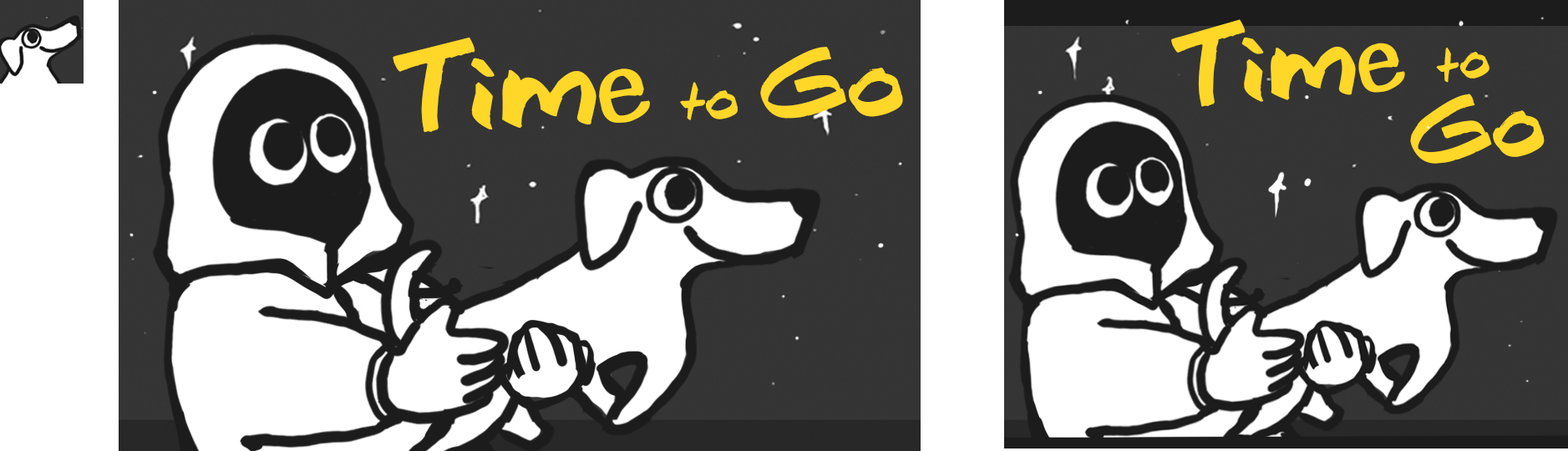
<style>
.page{position:relative;width:1568px;height:451px;background:#ffffff}
.page>*{position:absolute;margin:0}
.t1{font:110.2px "Brook23";color:#ffd728}
.t2{font:121.8px "Brook23";color:#ffd728}
.t3{font:102.3px "Brook23";color:#ffd728}
.t4{font:54.8px "Brook23";color:#ffd728}
.t5{font:60.6px "Brook23";color:#ffd728}
.t6{font:96.2px "Brook23";color:#ffd728}
</style>
<div class="page">
<p class="t1" style="left:1171px;top:19px;width:234px;height:88px;rotate:-5deg">Time</p>
<p class="t2" style="left:393px;top:37px;width:257px;height:96px;rotate:-3deg">Time</p>
<p class="t3" style="left:760px;top:46px;width:143px;height:73px;rotate:-1deg">Go</p>
<p class="t4" style="left:1436px;top:48px;width:53px;height:35px;rotate:-9deg">to</p>
<p class="t5" style="left:680px;top:82px;width:58px;height:38px;rotate:-1deg">to</p>
<p class="t6" style="left:1410px;top:94px;width:135px;height:70px;rotate:-5deg">Go</p>
</div>
